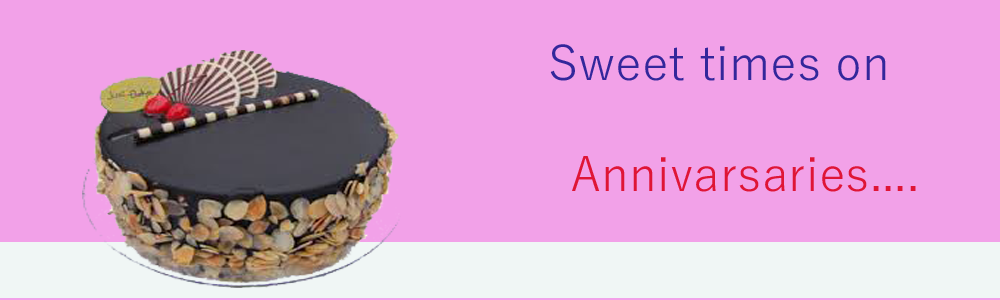
<style>
.page{position:relative;width:1000px;height:300px;background:#f2a1e8}
.page>*{position:absolute;margin:0}
.t1{font:48px "YuGothic-Regular";color:#df1536}
.t2{font:48px "MongolianBaiti";color:#47417c}
.t3{font:48px "YuGothic-Regular";color:#33279b}
</style>
<div class="page">
<p class="t1" style="left:550px;top:44px;width:366px;height:148px"><span class="t2"><br>     </span><span class="t3">Sweet times on <br>    <br>      </span>Annivarsaries....</p>
</div>
